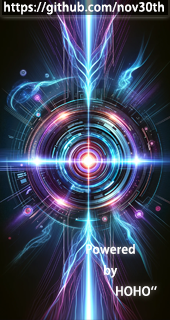
<style>
.page{position:relative;width:170px;height:320px}
.page>*{position:absolute;margin:0}
.t1{font:12px "AdobeHeitiStd-Regular";letter-spacing:0.025em;color:#ffffff}
</style>
<div class="page">
<p class="t1" style="left:4px;top:1px;width:160px;height:14px">https://github.com/nov30th</p>
<p class="t1" style="left:86px;top:244px;width:71px;height:52px">Powered<br>      by<br>          HOHO``</p>
</div>
